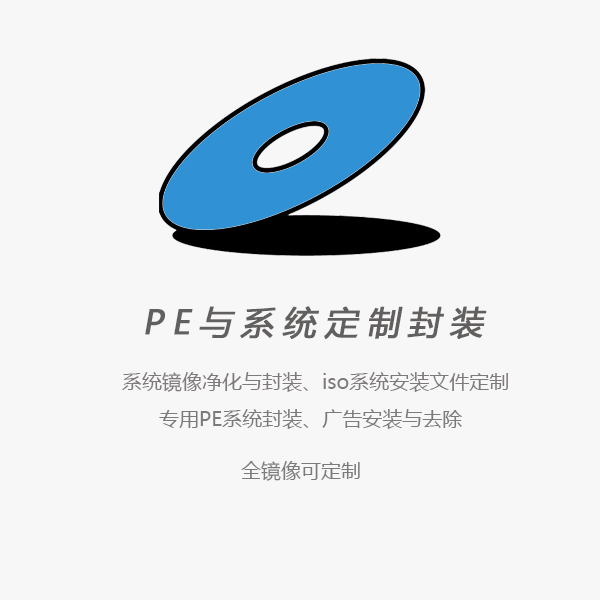
<style>
.page{position:relative;width:600px;height:600px;background:#f7f7f7}
.page>*{position:absolute;margin:0}
.t1{font:33px "MicrosoftYaHei";letter-spacing:0.24em;color:#625f5f;font-weight:bold;font-style:italic}
.t2{font:20px "MicrosoftYaHei";color:#7f7a7a}
.t3{font:20px "MicrosoftYaHei";color:#7c7a7a}
</style>
<div class="page">
<p class="t1" style="left:145px;top:306px;width:342px;height:33px">PE与系统定制封装</p>
<p class="t2" style="left:122px;top:372px;width:386px;height:20px">系统镜像净化与封装、iso系统安装文件定制</p>
<p class="t3" style="left:159px;top:409px;width:303px;height:20px">专用PE系统封装、广告安装与去除</p>
<p class="t3" style="left:241px;top:461px;width:119px;height:20px">全镜像可定制</p>
</div>
